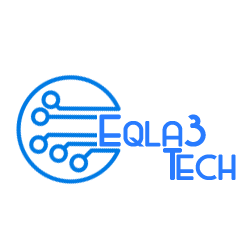
<style>
.page{position:relative;width:250px;height:250px;background:#ffffff}
.page>*{position:absolute;margin:0}
.t1{font:45px "Majel";letter-spacing:-0.01em;color:#287bff;scale:1.06 1}
</style>
<div class="page">
<p class="t1" style="left:123px;top:114px;width:83px;height:33px">qla3</p>
<p class="t1" style="left:163px;top:148px;width:73px;height:32px">Tech</p>
</div>
